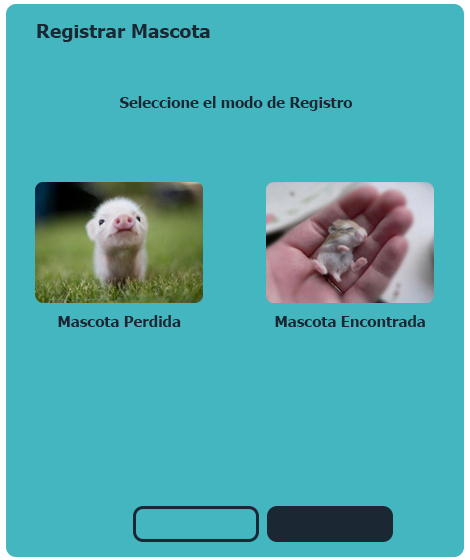
<style>
.page{position:relative;width:470px;height:560px;background:#44b6c0}
.page>*{position:absolute;margin:0}
.t1{font:19.2px "Tahoma-Bold";color:#1b2733}
.t2{font:14.8px "Tahoma-Bold";color:#1b2733}
</style>
<div class="page">
<p class="t1" style="left:37px;top:24px;width:173px;height:18px">Registrar Mascota</p>
<p class="t2" style="left:120px;top:96px;width:233px;height:15px">Seleccione el modo de Registro</p>
<p class="t2" style="left:58px;top:315px;width:123px;height:12px">Mascota Perdida</p>
<p class="t2" style="left:275px;top:315px;width:150px;height:12px">Mascota Encontrada</p>
</div>
